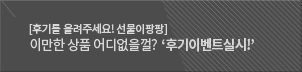
<style>
.page{position:relative;width:302px;height:72px;background:#4c4c4c}
.page>*{position:absolute;margin:0}
.t1{font:11px "NotoSansCJKkr-Medium";letter-spacing:-0.05em;color:#d8d8d8}
.t2{font:14px "NotoSansCJKkr-Regular";letter-spacing:-0.05em;color:#d8d8d8;scale:0.95 1}
.t3{font:14px "NotoSansCJKkr-Bold";letter-spacing:-0.05em;color:#d8d8d8;scale:0.95 1}
</style>
<div class="page">
<p class="t1" style="left:29px;top:23px;width:138px;height:12px">[후기를 올려주세요! 선물이팡팡]</p>
<p class="t2" style="left:30px;top:38px;width:224px;height:14px">이만한 상품 어디없을껄?  <span class="t3">‘후기이벤트실시!’</span></p>
</div>
